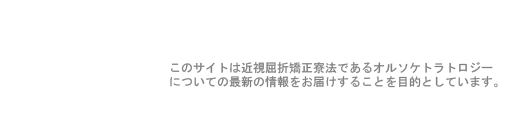
<style>
.page{position:relative;width:521px;height:114px;background:#ffffff}
.page>*{position:absolute;margin:0}
.t1{font:12px "MS-Gothic";color:#808080}
</style>
<div class="page">
<p class="t1" style="left:170px;top:62px;width:328px;height:26px">このサイトは近視屈折矯正寮法であるオルソケトラトロジー<br>についての最新の情報をお届けすることを目的としています。</p>
</div>
